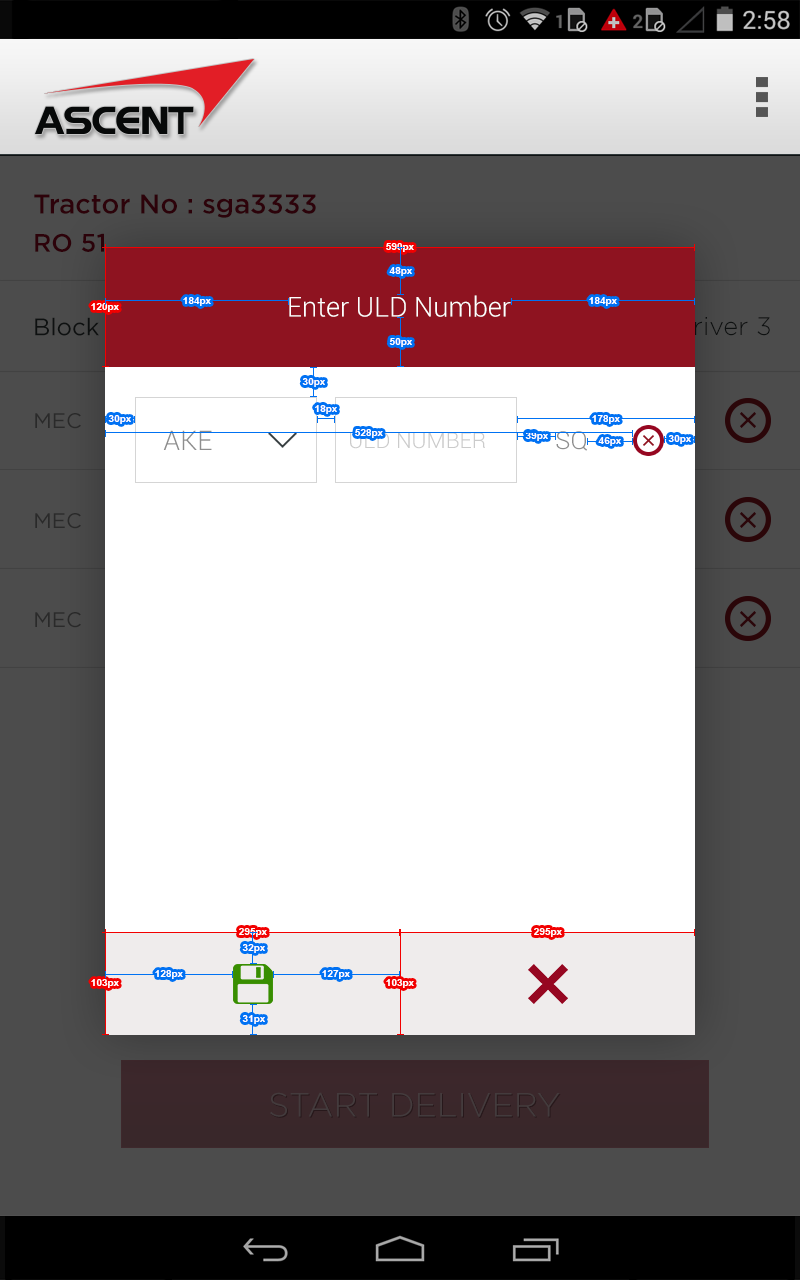
<style>
.page{position:relative;width:800px;height:1280px;background:#ffffff}
.page>*{position:absolute;margin:0}
.t1{font:27.2px "Gotham-Medium";color:#2d020a}
.t2{font:25.4px "Gotham-Medium";color:#2d020a}
.t3{font:10px "Arial-BoldMT";color:#ffffff}
.t4{font:27.2px "Roboto-Light";color:#ffffff}
.t5{font:25.4px "Gotham-Light"}
.t6{font:21.1px "Gotham-Book";color:#2a2a2a}
.t7{font:27.3px "Roboto-Light";color:#8e8e8e}
.t8{font:22px "Roboto-Light";color:#cbcbcb}
.t9{font:25px "Roboto-Light";color:#8e8e8e}
.t10{font:33.5px "Gotham-Light";color:#443b3d}
</style>
<div class="page">
<p class="t1" style="left:34px;top:194px;width:282px;height:24px">Tractor No : sga3333</p>
<p class="t2" style="left:35px;top:233px;width:69px;height:19px">RO 51</p>
<p class="t3" style="left:386px;top:243px;width:28px;height:9px">590px</p>
<p class="t3" style="left:389px;top:267px;width:23px;height:9px">48px</p>
<p class="t3" style="left:91px;top:303px;width:28px;height:9px">120px</p>
<p class="t3" style="left:183px;top:297px;width:28px;height:9px">184px</p>
<p class="t4" style="left:289px;top:295px;width:222px;height:22px">Enter ULD Number</p>
<p class="t3" style="left:589px;top:297px;width:28px;height:9px">184px</p>
<p class="t5" style="left:675px;top:317px;width:95px;height:19px">Driver 3</p>
<p class="t3" style="left:389px;top:338px;width:23px;height:9px">50px</p>
<p class="t3" style="left:302px;top:378px;width:23px;height:9px">30px</p>
<p class="t6" style="left:35px;top:413px;width:46px;height:16px">MEC</p>
<p class="t3" style="left:315px;top:405px;width:22px;height:9px">18px</p>
<p class="t3" style="left:108px;top:415px;width:23px;height:9px">30px</p>
<p class="t3" style="left:592px;top:415px;width:28px;height:9px">178px</p>
<p class="t7" style="left:163px;top:430px;width:49px;height:20px">AKE</p>
<p class="t8" style="left:350px;top:432px;width:135px;height:17px">ULD NUMBER</p>
<p class="t3" style="left:355px;top:429px;width:28px;height:9px">528px</p>
<p class="t3" style="left:525px;top:432px;width:23px;height:9px">39px</p>
<p class="t9" style="left:556px;top:431px;width:31px;height:20px">SQ</p>
<p class="t3" style="left:598px;top:437px;width:23px;height:9px">46px</p>
<p class="t3" style="left:668px;top:435px;width:23px;height:9px">30px</p>
<p class="t6" style="left:35px;top:513px;width:46px;height:16px">MEC</p>
<p class="t6" style="left:35px;top:612px;width:46px;height:16px">MEC</p>
<p class="t3" style="left:239px;top:928px;width:28px;height:9px">295px</p>
<p class="t3" style="left:534px;top:928px;width:28px;height:9px">295px</p>
<p class="t3" style="left:242px;top:944px;width:23px;height:9px">32px</p>
<p class="t3" style="left:155px;top:970px;width:28px;height:9px">128px</p>
<p class="t3" style="left:322px;top:970px;width:28px;height:9px">127px</p>
<p class="t3" style="left:91px;top:979px;width:28px;height:9px">103px</p>
<p class="t3" style="left:386px;top:979px;width:28px;height:9px">103px</p>
<p class="t3" style="left:242px;top:1015px;width:23px;height:9px">31px</p>
<p class="t10" style="left:270px;top:1092px;width:290px;height:25px">START DELIVERY</p>
</div>
